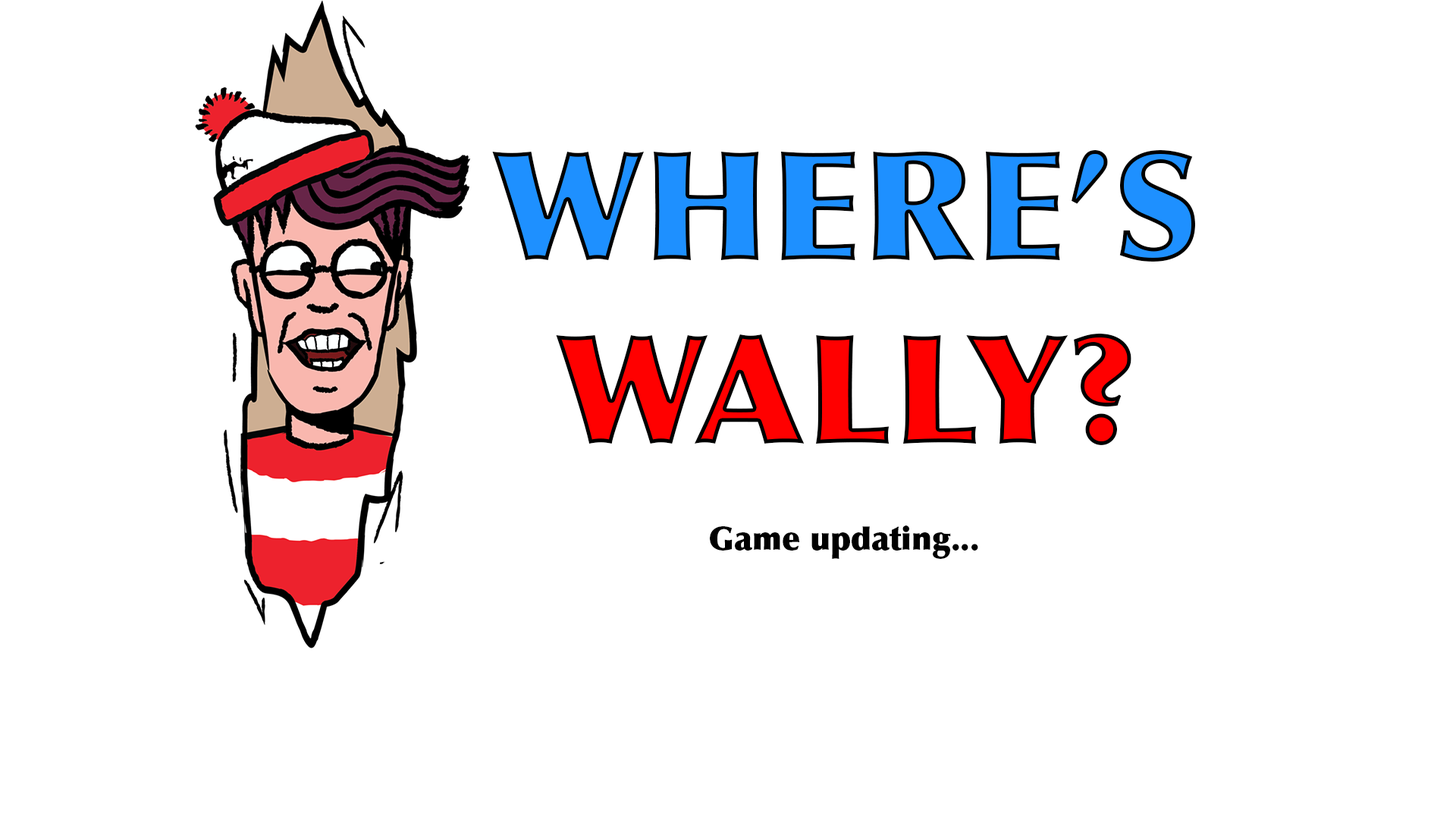
<style>
.page{position:relative;width:1456px;height:819px;background:#ffffff}
.page>*{position:absolute;margin:0}
.t1{font:151.7px "Optima-ExtraBlack";color:#1e90ff}
.t2{font:151.7px "Optima-ExtraBlack";color:#ff0000}
.t3{font:151.7px "Optima-ExtraBlack";color:#0000ff}
.t4{font:31.6px "Optima-ExtraBlack";color:#000000}
</style>
<div class="page">
<p class="t1" style="left:492px;top:150px;width:703px;height:112px">WHERE’S</p>
<p class="t2" style="left:556px;top:334px;width:575px;height:111px"><span class="t3"> <br></span>  WALLY?</p>
<p class="t4" style="left:710px;top:526px;width:268px;height:33px">Game updating...</p>
</div>
